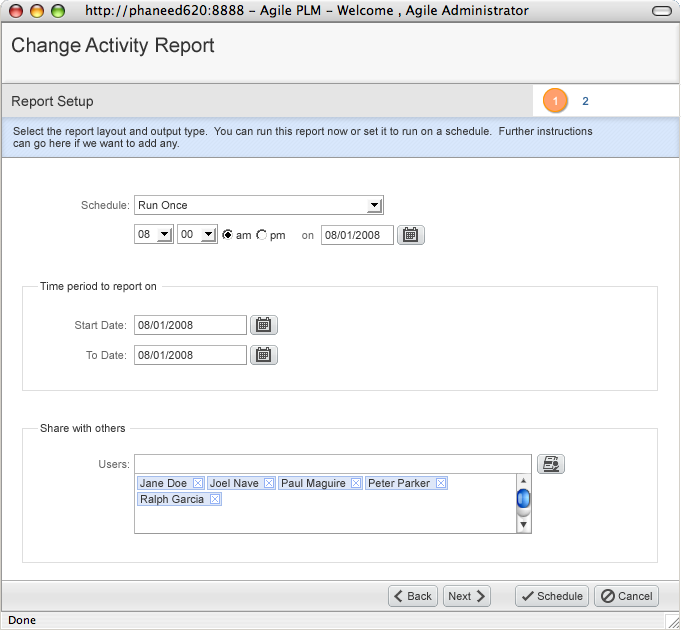
<style>
.page{position:relative;width:681px;height:630px;background:#ffffff}
.page>*{position:absolute;margin:0}
.t1{font:20px "ArialMT";color:#333333}
.t2{font:14px "ArialMT";color:#333333}
.t3{font:11px "ArialMT";color:#ffffff}
.t4{font:11px "ArialMT";color:#336699}
.t5{font:11px/12px "ArialMT";color:#333333}
.t6{font:11px "ArialMT";color:#666666}
.t7{font:11px "ArialMT";color:#333333}
</style>
<div class="page">
<p class="t1" style="left:12px;top:37px;width:203px;height:20px">Change Activity Report</p>
<p class="t2" style="left:12px;top:95px;width:81px;height:14px">Report Setup</p>
<p class="t3" style="left:553px;top:96px;width:4px;height:9px">1</p>
<p class="t4" style="left:582px;top:96px;width:7px;height:9px">2</p>
<p class="t5" style="left:13px;top:127px;width:580px;height:23px">Select the report layout and output type.  You can run this report now or set it to run on a schedule.  Further instructions <br>can go here if we want to add any.</p>
<p class="t6" style="left:81px;top:201px;width:48px;height:8px">Schedule:</p>
<p class="t7" style="left:139px;top:201px;width:48px;height:8px">Run Once</p>
<p class="t7" style="left:138px;top:230px;width:12px;height:8px">08</p>
<p class="t7" style="left:181px;top:230px;width:12px;height:8px">00</p>
<p class="t7" style="left:236px;top:233px;width:15px;height:6px">am</p>
<p class="t7" style="left:270px;top:233px;width:15px;height:9px">pm</p>
<p class="t6" style="left:302px;top:233px;width:12px;height:6px">on</p>
<p class="t7" style="left:325px;top:231px;width:55px;height:8px">08/01/2008</p>
<p class="t7" style="left:40px;top:282px;width:116px;height:11px">Time period to report on</p>
<p class="t6" style="left:75px;top:321px;width:51px;height:8px">Start Date:</p>
<p class="t7" style="left:138px;top:321px;width:55px;height:8px">08/01/2008</p>
<p class="t6" style="left:86px;top:351px;width:40px;height:8px">To Date:</p>
<p class="t7" style="left:138px;top:351px;width:55px;height:8px">08/01/2008</p>
<p class="t7" style="left:40px;top:424px;width:85px;height:8px">Share with others</p>
<p class="t6" style="left:99px;top:460px;width:30px;height:8px">Users:</p>
<p class="t7" style="left:408px;top:592px;width:24px;height:8px">Back</p>
<p class="t7" style="left:449px;top:592px;width:22px;height:8px">Next</p>
<p class="t7" style="left:537px;top:592px;width:46px;height:8px">Schedule</p>
<p class="t7" style="left:618px;top:592px;width:34px;height:8px">Cancel</p>
</div>
